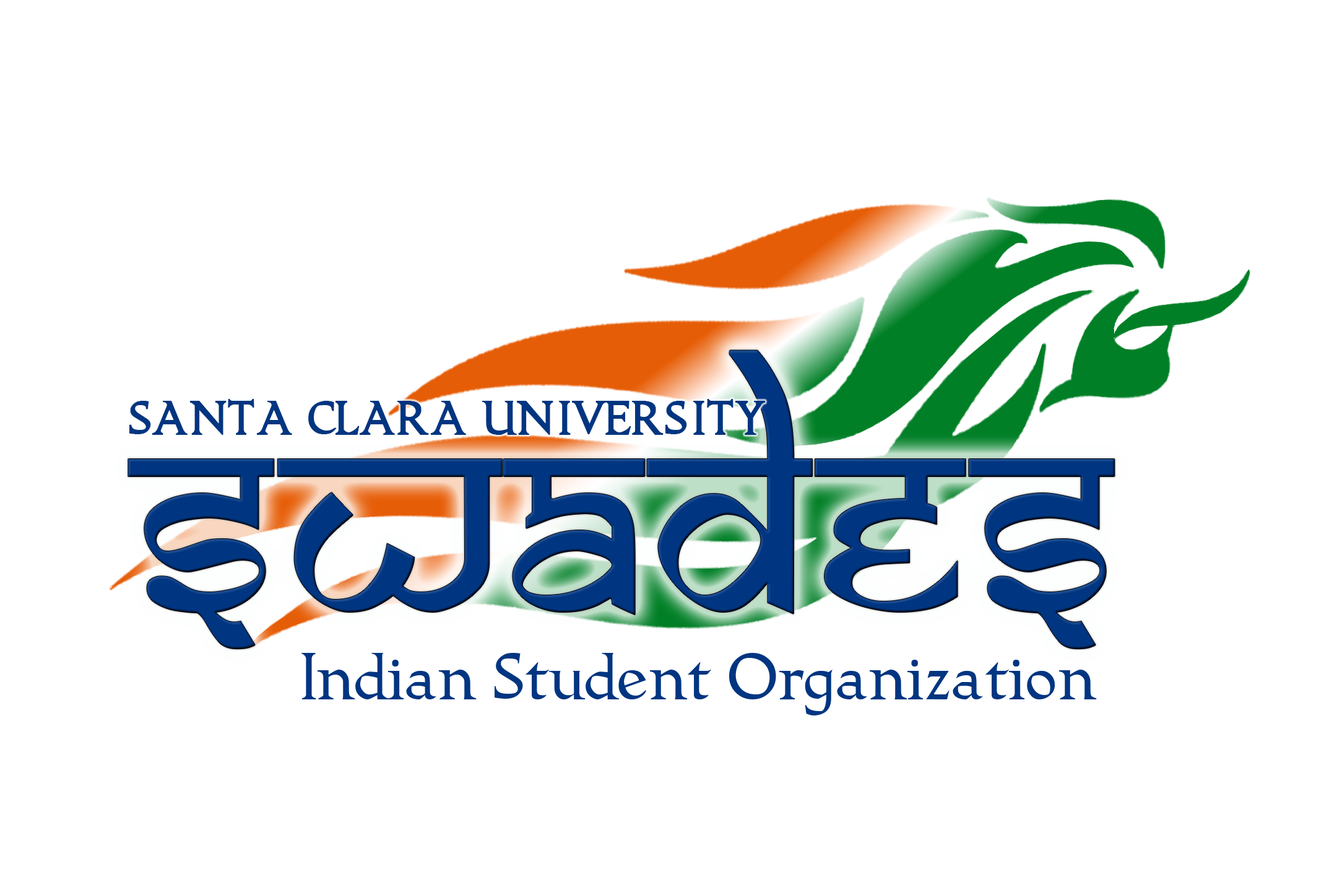
<style>
.page{position:relative;width:1337px;height:892px;background:#ffffff}
.page>*{position:absolute;margin:0}
.t1{font:288.7px "SamarkanNormal";letter-spacing:0.025em;color:#003581}
.t2{font:45.2px "Seafaring";letter-spacing:0.025em;color:#003581;font-weight:bold}
.t3{font:63.7px "Seafaring";letter-spacing:0.025em;color:#003581}
</style>
<div class="page">
<p class="t1" style="left:128px;top:350px;width:987px;height:299px">swades</p>
<p class="t2" style="left:129px;top:399px;width:636px;height:36px">SANTA CLARA UNIVERSITY</p>
<p class="t3" style="left:302px;top:653px;width:795px;height:62px">Indian Student Organization</p>
</div>
